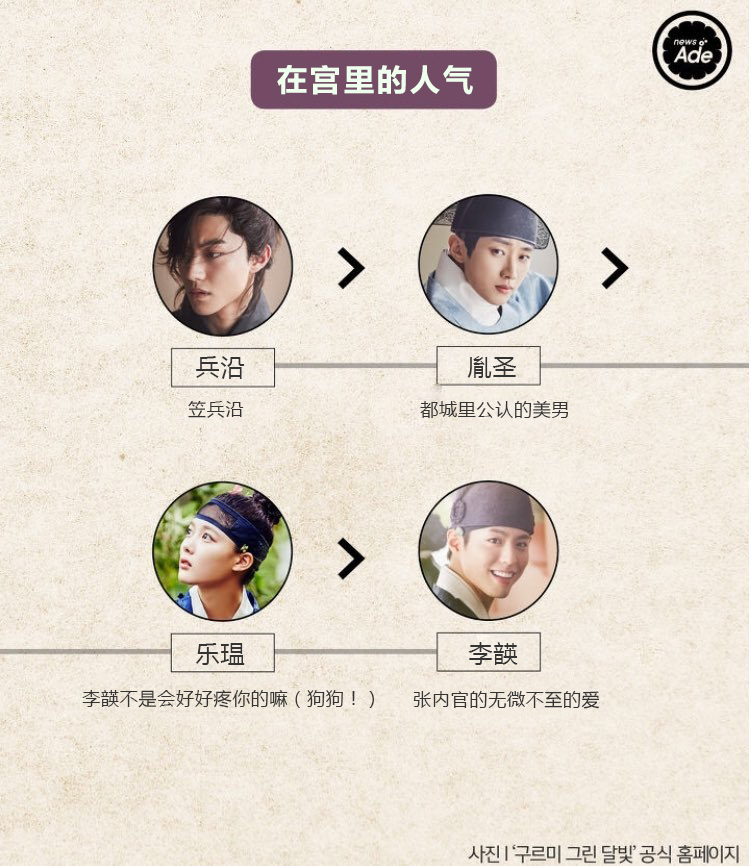
<style>
.page{position:relative;width:751px;height:866px}
.page>*{position:absolute;margin:0}
.t1{font:32px "FZLTCHK--GBK1-0";letter-spacing:0.04em;color:#efffee}
.t2{font:24px "MicrosoftYaHei";letter-spacing:0.04em;color:#333333}
.t3{font:18px "MicrosoftYaHei";letter-spacing:0.04em;color:#333333}
</style>
<div class="page">
<p class="t1" style="left:277px;top:65px;width:196px;height:30px">在宫里的人气</p>
<p class="t2" style="left:196px;top:356px;width:49px;height:23px">兵沿</p>
<p class="t2" style="left:467px;top:356px;width:50px;height:22px">胤圣</p>
<p class="t3" style="left:188px;top:400px;width:56px;height:18px">笠兵沿</p>
<p class="t3" style="left:420px;top:400px;width:149px;height:19px">都城里公认的美男</p>
<p class="t2" style="left:196px;top:643px;width:49px;height:22px">乐瑥</p>
<p class="t2" style="left:468px;top:642px;width:50px;height:23px">李韺</p>
<p class="t3" style="left:82px;top:690px;width:293px;height:18px">李韺不是会好好疼你的嘛（狗狗！）</p>
<p class="t3" style="left:413px;top:691px;width:187px;height:18px">张内官的无微不至的爱</p>
</div>
